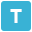
<style>
.page{position:relative;width:32px;height:32px;background:#39b2d5}
.page>*{position:absolute;margin:0}
.t1{font:18.8px "HelveticaNeue-Bold";color:#ffffff}
</style>
<div class="page">
<p class="t1" style="left:10px;top:9px;width:12px;height:14px">T</p>
</div>
